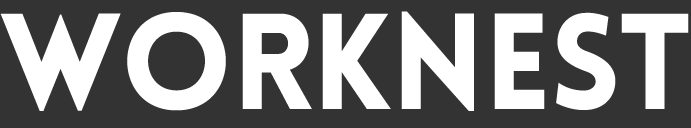
<style>
.page{position:relative;width:691px;height:128px;background:#333333}
.page>*{position:absolute;margin:0}
.t1{font:133.3px "LoveloBlack";letter-spacing:-0.01em;color:#ffffff}
</style>
<div class="page">
<p class="t1" style="left:0px;top:11px;width:689px;height:101px">Worknest</p>
</div>
